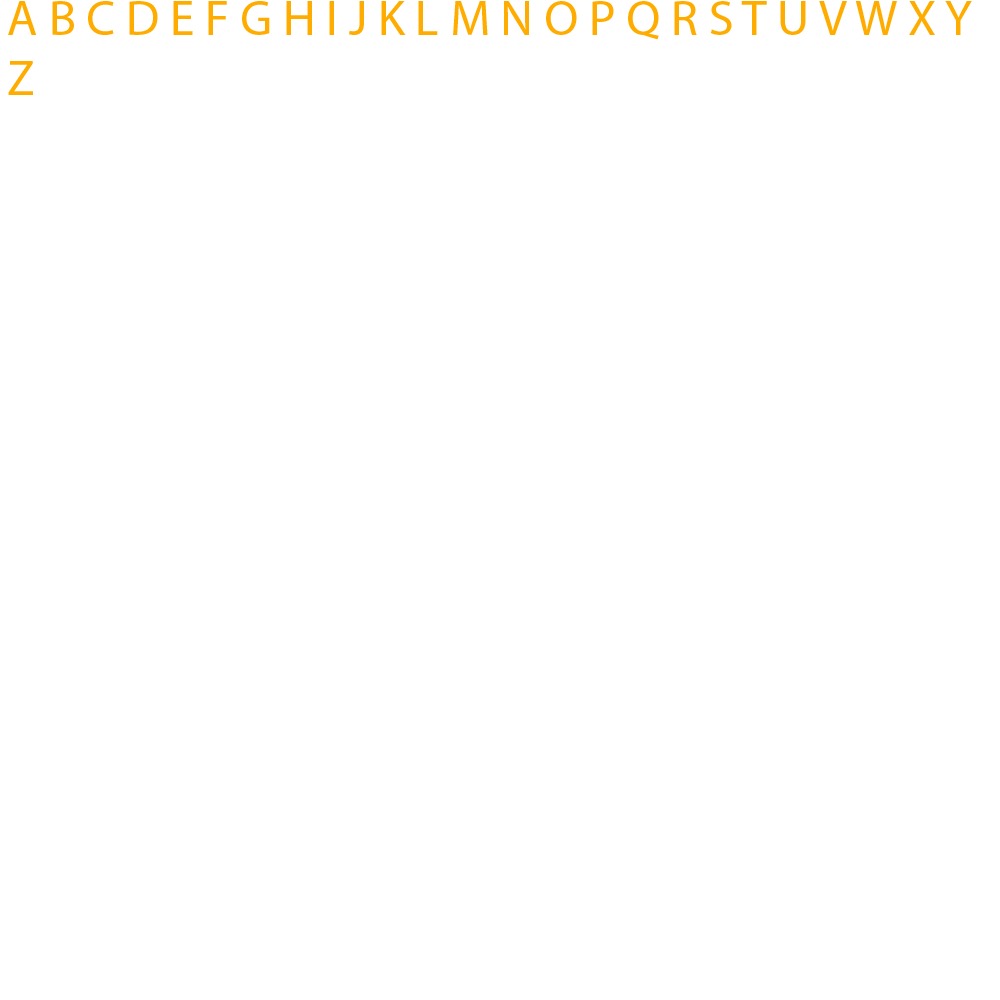
<style>
.page{position:relative;width:1000px;height:1000px;background:#ffffff}
.page>*{position:absolute;margin:0}
.t1{font:12px "MyriadPro-Regular";color:#fead00}
</style>
<div class="page">
<p class="t1" style="left:8px;top:1px;width:964px;height:94px">A B C D E F G H I J K L M N O P Q R S T U V W X Y Z</p>
</div>
